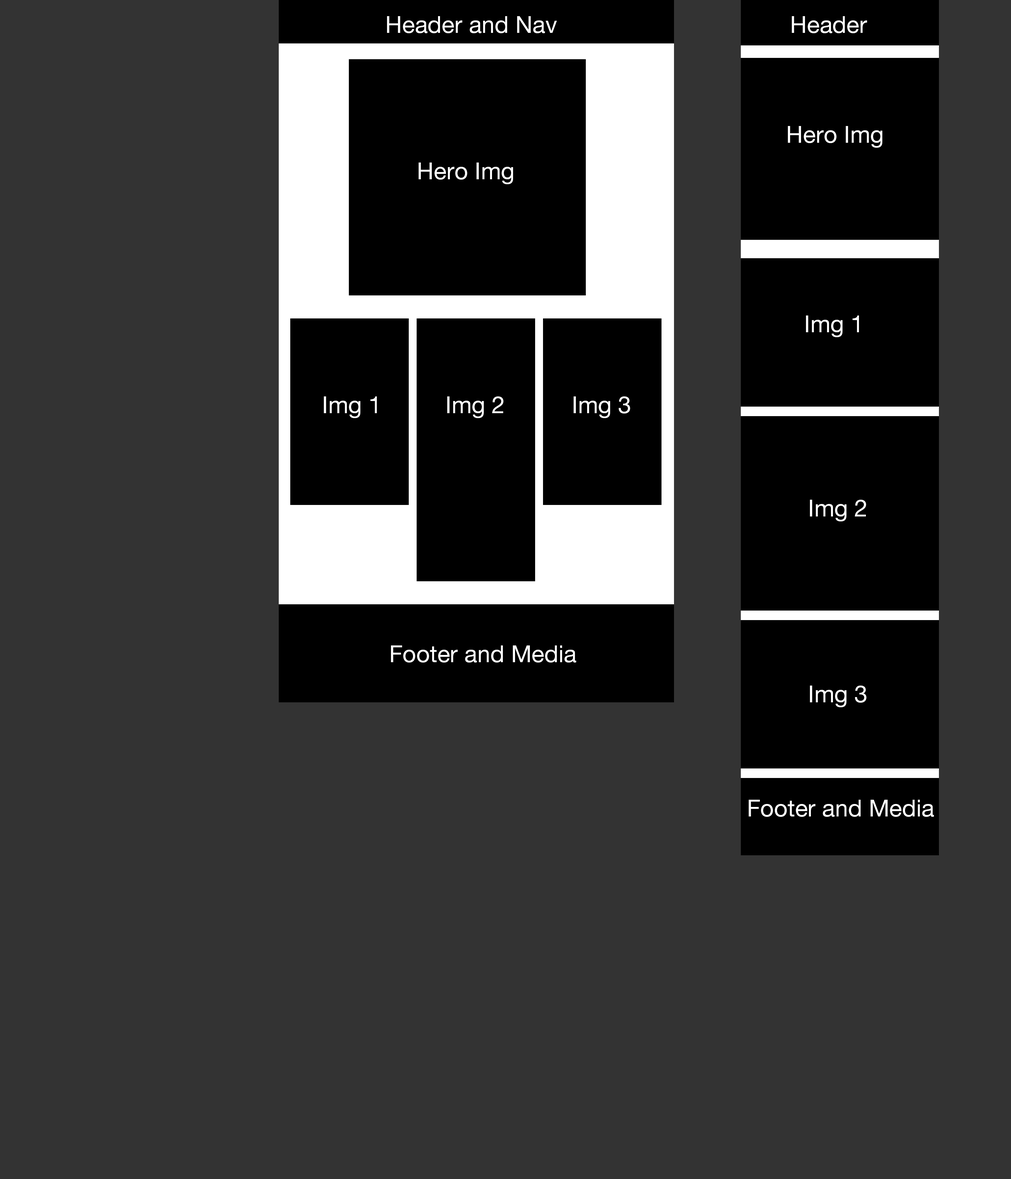
<style>
.page{position:relative;width:1011px;height:1179px;background:#333333}
.page>*{position:absolute;margin:0}
.t1{font:23.7px "HelveticaNeueLTPro-Roman";color:#ffffff}
</style>
<div class="page">
<p class="t1" style="left:387px;top:16px;width:170px;height:17px">Header and Nav</p>
<p class="t1" style="left:792px;top:16px;width:75px;height:17px">Header</p>
<p class="t1" style="left:788px;top:126px;width:94px;height:22px">Hero Img</p>
<p class="t1" style="left:419px;top:163px;width:94px;height:21px">Hero Img</p>
<p class="t1" style="left:806px;top:316px;width:53px;height:21px">Img 1</p>
<p class="t1" style="left:324px;top:397px;width:53px;height:21px">Img 1</p>
<p class="t1" style="left:447px;top:397px;width:57px;height:21px">Img 2</p>
<p class="t1" style="left:574px;top:397px;width:56px;height:21px">Img 3</p>
<p class="t1" style="left:810px;top:500px;width:56px;height:22px">Img 2</p>
<p class="t1" style="left:391px;top:646px;width:185px;height:17px">Footer and Media</p>
<p class="t1" style="left:810px;top:686px;width:57px;height:22px">Img 3</p>
<p class="t1" style="left:749px;top:800px;width:185px;height:17px">Footer and Media</p>
</div>
